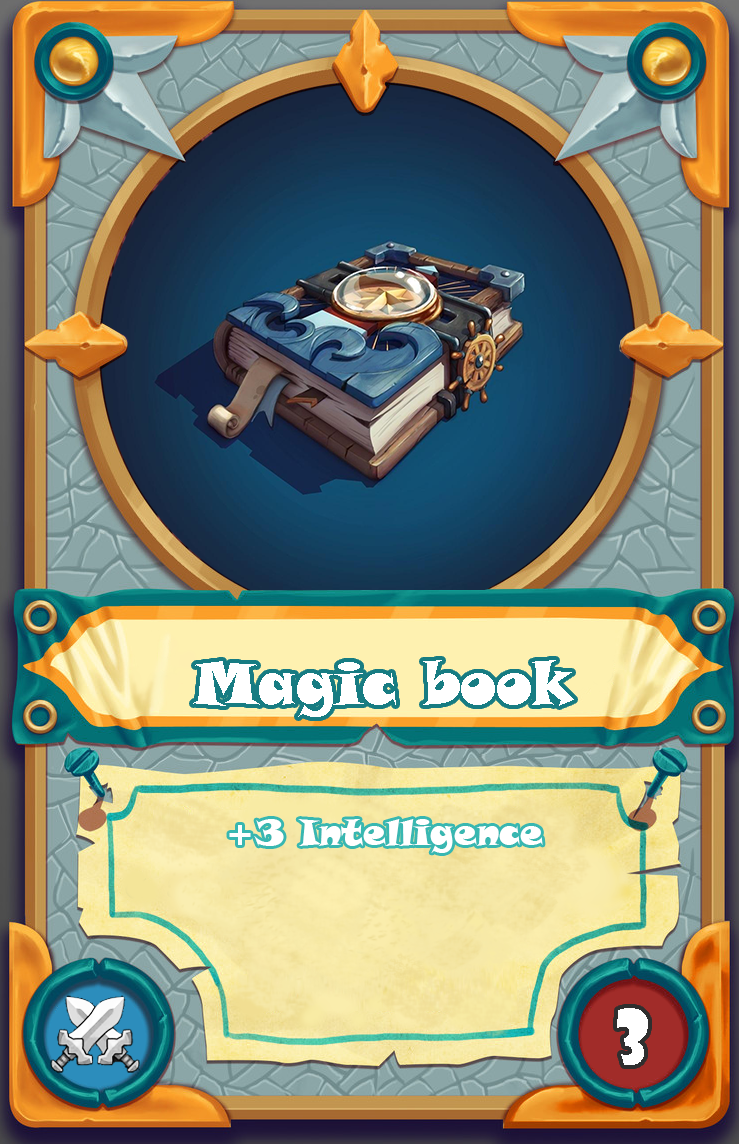
<style>
.page{position:relative;width:739px;height:1144px}
.page>*{position:absolute;margin:0}
.t1{font:60px "SnapITC-Regular";color:#ffffff}
.t2{font:36px "SnapITC-Regular";color:#ffffff}
.t3{font:72px "ShowcardGothic-Reg";color:#ffffff}
</style>
<div class="page">
<p class="t1" style="left:193px;top:660px;width:381px;height:57px">Magic book</p>
<p class="t2" style="left:229px;top:819px;width:314px;height:34px">+3 Intelligence</p>
<p class="t3" style="left:617px;top:1008px;width:31px;height:57px">3</p>
</div>
